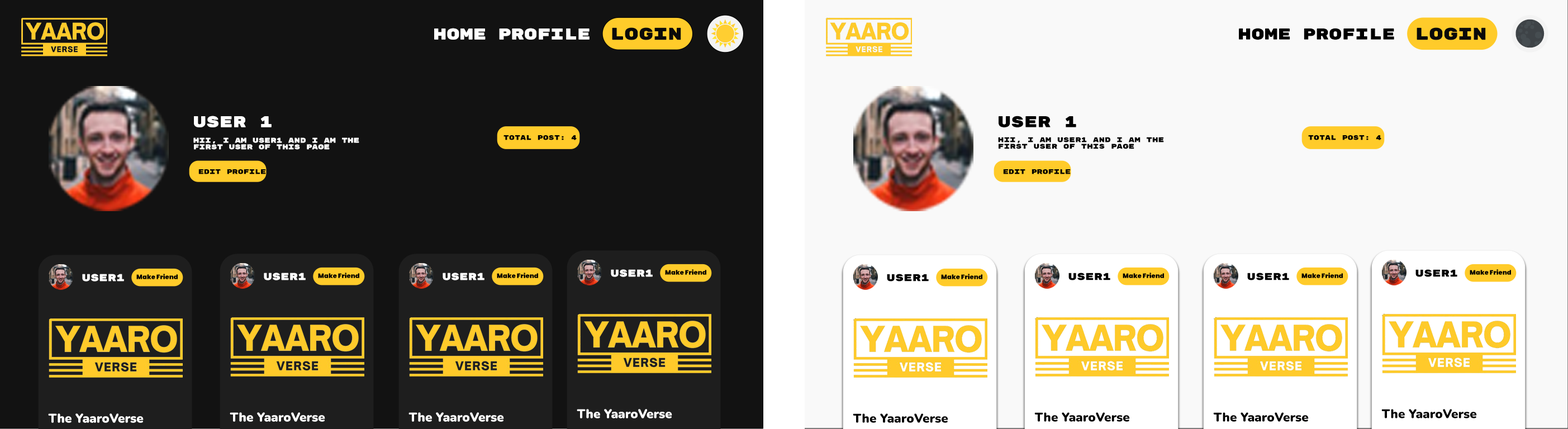
<style>
.page{position:relative;width:1568px;height:429px;background:#121212}
.page>*{position:absolute;margin:0}
.t1{font:15.6px "RubikMonoOne-Regular";color:#ffffff}
.t2{font:17.1px "RubikMonoOne-Regular";color:#0a0a0a}
.t3{font:15.6px "RubikMonoOne-Regular";color:#000000}
.t4{font:7px/6.5px "RubikMonoOne-Regular";color:#ffffff}
.t5{font:6.7px "RubikMonoOne-Regular";color:#000000}
.t6{font:7px/6.5px "RubikMonoOne-Regular";color:#000000}
.t7{font:10.1px "RubikMonoOne-Regular";color:#ffffff}
.t8{font:6.5px "Poppins-Black";color:#000000}
.t9{font:10.1px "RubikMonoOne-Regular";color:#000000}
.t10{font:12.5px "Nunito-Black";color:#ffffff}
.t11{font:12.5px "Nunito-Black";color:#000000}
</style>
<div class="page">
<p class="t1" style="left:434px;top:28px;width:52px;height:12px">home</p>
<p class="t1" style="left:499px;top:28px;width:91px;height:12px">Profile</p>
<p class="t2" style="left:612px;top:27px;width:69px;height:13px">Login</p>
<p class="t3" style="left:1239px;top:28px;width:51px;height:12px">home</p>
<p class="t3" style="left:1304px;top:28px;width:90px;height:12px">Profile</p>
<p class="t2" style="left:1417px;top:27px;width:69px;height:13px">Login</p>
<p class="t1" style="left:194px;top:116px;width:78px;height:11px">User 1</p>
<p class="t3" style="left:999px;top:116px;width:77px;height:11px">User 1</p>
<p class="t4" style="left:193px;top:137px;width:166px;height:13px">Hii, I am user1 and i am the <br>first user of this page</p>
<p class="t5" style="left:503px;top:135px;width:74px;height:5px">Total Post: 4</p>
<p class="t6" style="left:998px;top:137px;width:166px;height:12px">Hii, I am user1 and i am the <br>first user of this page</p>
<p class="t5" style="left:1308px;top:135px;width:73px;height:5px">Total Post: 4</p>
<p class="t5" style="left:198px;top:169px;width:68px;height:5px">Edit Profile</p>
<p class="t5" style="left:1003px;top:169px;width:68px;height:5px">Edit Profile</p>
<p class="t7" style="left:611px;top:269px;width:42px;height:8px">User1</p>
<p class="t8" style="left:665px;top:269px;width:41px;height:6px">Make Friend</p>
<p class="t9" style="left:1415px;top:269px;width:42px;height:8px">User1</p>
<p class="t8" style="left:1470px;top:269px;width:41px;height:6px">Make Friend</p>
<p class="t7" style="left:82px;top:274px;width:42px;height:8px">User1</p>
<p class="t8" style="left:136px;top:274px;width:42px;height:5px">Make Friend</p>
<p class="t7" style="left:264px;top:273px;width:42px;height:8px">User1</p>
<p class="t8" style="left:318px;top:273px;width:41px;height:5px">Make Friend</p>
<p class="t7" style="left:443px;top:273px;width:41px;height:8px">User1</p>
<p class="t8" style="left:497px;top:273px;width:41px;height:5px">Make Friend</p>
<p class="t9" style="left:887px;top:274px;width:42px;height:8px">User1</p>
<p class="t8" style="left:941px;top:274px;width:41px;height:5px">Make Friend</p>
<p class="t9" style="left:1068px;top:273px;width:42px;height:8px">User1</p>
<p class="t8" style="left:1123px;top:273px;width:41px;height:5px">Make Friend</p>
<p class="t9" style="left:1247px;top:273px;width:42px;height:8px">User1</p>
<p class="t8" style="left:1301px;top:273px;width:42px;height:5px">Make Friend</p>
<p class="t10" style="left:48px;top:414px;width:96px;height:9px">The YaaroVerse</p>
<p class="t10" style="left:230px;top:412px;width:95px;height:10px">The YaaroVerse</p>
<p class="t10" style="left:408px;top:412px;width:96px;height:10px">The YaaroVerse</p>
<p class="t10" style="left:577px;top:409px;width:95px;height:10px">The YaaroVerse</p>
<p class="t11" style="left:853px;top:414px;width:95px;height:9px">The YaaroVerse</p>
<p class="t11" style="left:1034px;top:412px;width:96px;height:10px">The YaaroVerse</p>
<p class="t11" style="left:1213px;top:412px;width:96px;height:10px">The YaaroVerse</p>
<p class="t11" style="left:1381px;top:409px;width:96px;height:10px">The YaaroVerse</p>
</div>
